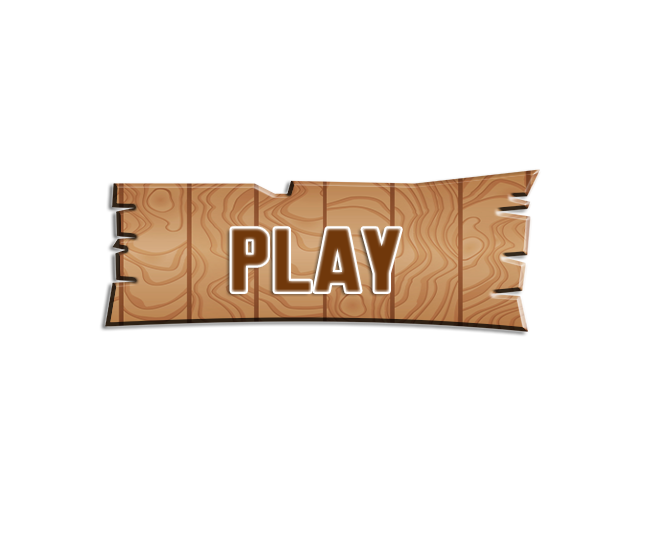
<style>
.page{position:relative;width:650px;height:536px;background:#ffffff}
.page>*{position:absolute;margin:0}
.t1{font:70px "BrewmasterGothicRound";color:#70380b;scale:1.26 1}
</style>
<div class="page">
<p class="t1" style="left:231px;top:228px;width:170px;height:64px">play</p>
</div>
